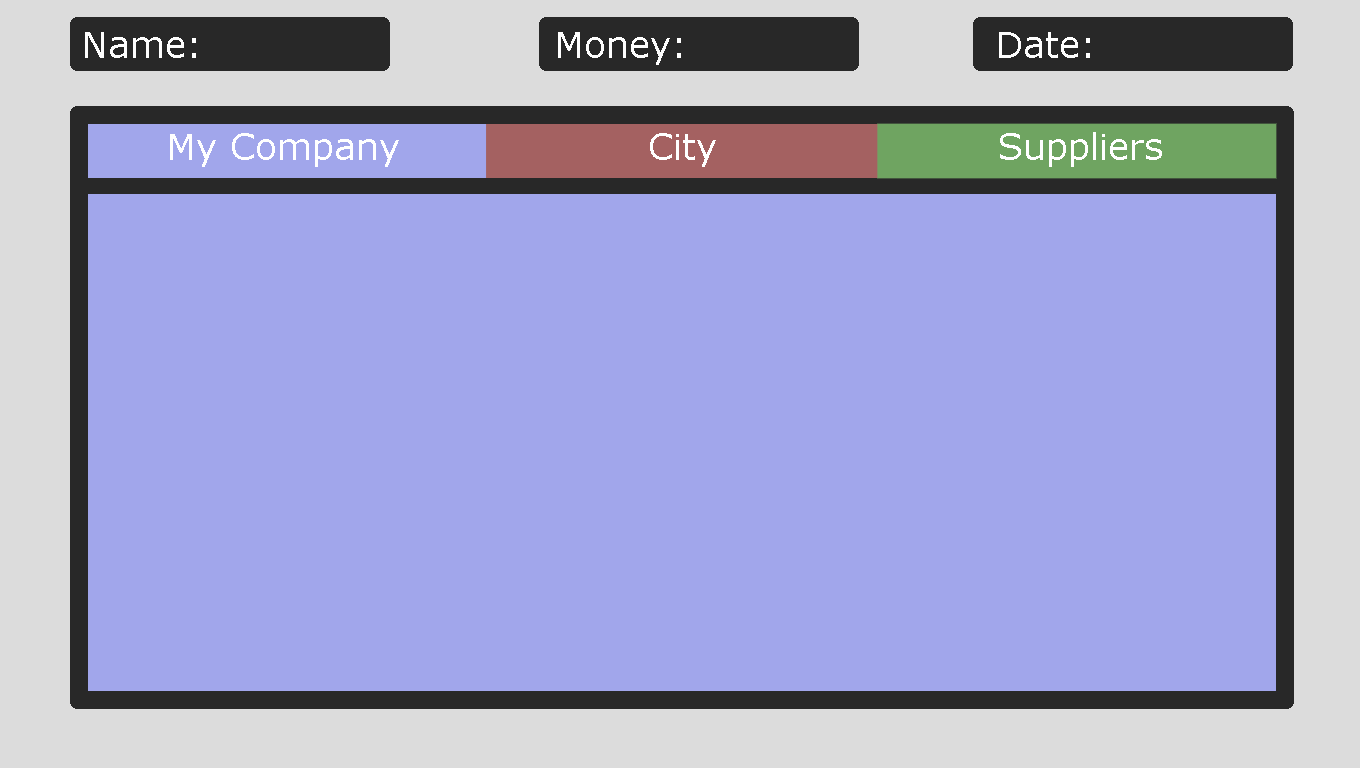
<style>
.page{position:relative;width:1360px;height:768px;background:#a1a6eb}
.page>*{position:absolute;margin:0}
.t1{font:36px "Verdana";color:#ffffff}
</style>
<div class="page">
<p class="t1" style="left:85px;top:32px;width:111px;height:26px">Name:</p>
<p class="t1" style="left:558px;top:32px;width:123px;height:33px">Money:</p>
<p class="t1" style="left:999px;top:32px;width:91px;height:26px">Date:</p>
<p class="t1" style="left:170px;top:133px;width:229px;height:34px">My Company</p>
<p class="t1" style="left:650px;top:133px;width:66px;height:34px">City</p>
<p class="t1" style="left:1000px;top:132px;width:162px;height:35px">Suppliers</p>
</div>
